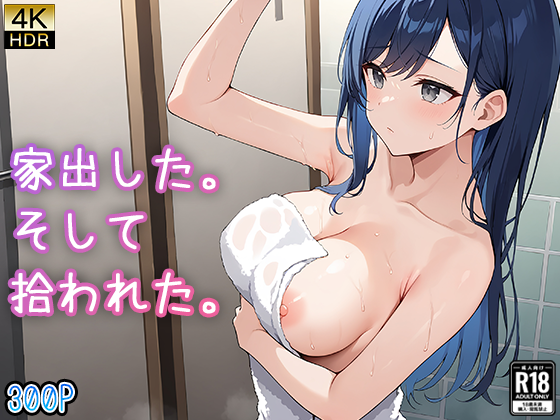
<style>
.page{position:relative;width:560px;height:420px}
.page>*{position:absolute;margin:0}
.t1{font:45.8px/62px "azuki_font";color:#ffffff;font-weight:bold}
.t2{font:34.7px "azuki_font"}
</style>
<div class="page">
<p class="t1" style="left:11px;top:147px;width:205px;height:167px">家出した。<br>そして<br>拾われた。</p>
<p class="t2" style="left:9px;top:383px;width:64px;height:29px">300P</p>
</div>
